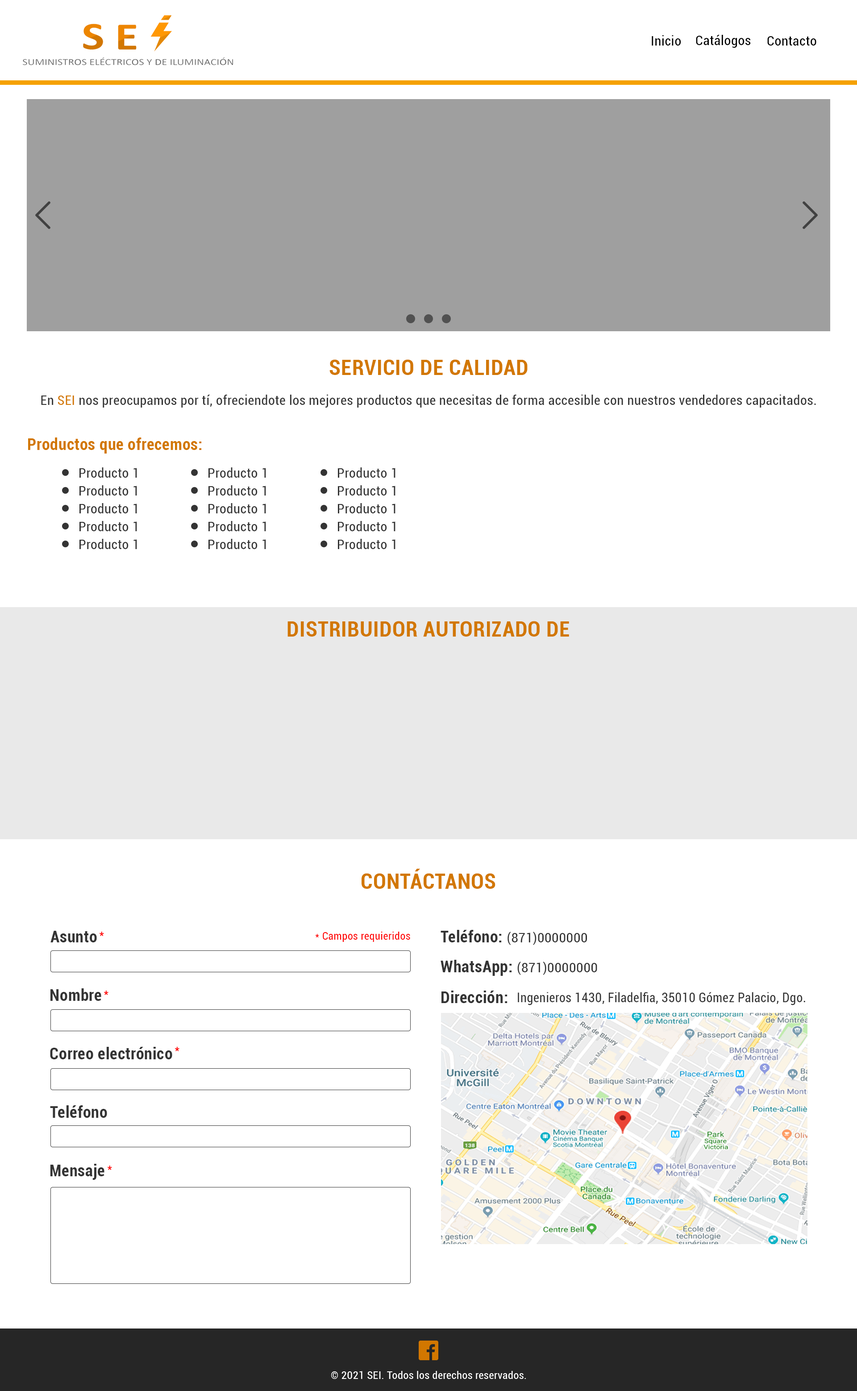
<style>
.page{position:relative;width:857px;height:1391px;background:#ffffff}
.page>*{position:absolute;margin:0}
.t1{font:13.4px "Roboto-Condensed";letter-spacing:0.025em;color:#000000}
.t2{font:21.4px "Roboto-BoldCondensed";letter-spacing:0.025em;color:#d27700}
.t3{font:13.4px "Roboto-Condensed";letter-spacing:0.025em;color:#343434}
.t4{font:13.4px "Roboto-Condensed";letter-spacing:0.025em;color:#d27700}
.t5{font:16.1px "Roboto-BoldCondensed";letter-spacing:0.025em;color:#d27700}
.t6{font:16.1px "Roboto-BoldCondensed";letter-spacing:0.025em;color:#343434}
.t7{font:13.4px "Roboto-Condensed";letter-spacing:0.025em;color:#ff0000}
.t8{font:10.7px "Roboto-Condensed";letter-spacing:0.025em;color:#ff0000}
.t9{font:13.4px "Roboto-Condensed";letter-spacing:0.025em;color:#343434;scale:0.94 1}
.t10{font:10.7px "Roboto-Condensed";letter-spacing:0.025em;color:#ffffff}
</style>
<div class="page">
<p class="t1" style="left:652px;top:35px;width:29px;height:11px">Inicio</p>
<p class="t1" style="left:696px;top:35px;width:55px;height:13px">Catálogos</p>
<p class="t1" style="left:767px;top:36px;width:50px;height:10px">Contacto</p>
<p class="t2" style="left:329px;top:359px;width:199px;height:16px">SERVICIO DE CALIDAD</p>
<p class="t3" style="left:41px;top:395px;width:775px;height:13px">En <span class="t4">SEI </span>nos preocupamos por tí, ofreciendote los mejores productos que necesitas de forma accesible con nuestros vendedores capacitados.</p>
<p class="t5" style="left:28px;top:438px;width:174px;height:16px">Productos que ofrecemos:</p>
<p class="t3" style="left:79px;top:467px;width:58px;height:11px">Producto 1</p>
<p class="t3" style="left:208px;top:467px;width:58px;height:11px">Producto 1</p>
<p class="t3" style="left:338px;top:467px;width:58px;height:11px">Producto 1</p>
<p class="t3" style="left:79px;top:485px;width:58px;height:11px">Producto 1</p>
<p class="t3" style="left:208px;top:485px;width:58px;height:11px">Producto 1</p>
<p class="t3" style="left:338px;top:485px;width:58px;height:11px">Producto 1</p>
<p class="t3" style="left:79px;top:503px;width:58px;height:10px">Producto 1</p>
<p class="t3" style="left:208px;top:503px;width:58px;height:10px">Producto 1</p>
<p class="t3" style="left:338px;top:503px;width:58px;height:10px">Producto 1</p>
<p class="t3" style="left:79px;top:521px;width:58px;height:10px">Producto 1</p>
<p class="t3" style="left:208px;top:521px;width:58px;height:10px">Producto 1</p>
<p class="t3" style="left:338px;top:521px;width:58px;height:10px">Producto 1</p>
<p class="t3" style="left:79px;top:539px;width:58px;height:10px">Producto 1</p>
<p class="t3" style="left:208px;top:539px;width:58px;height:10px">Producto 1</p>
<p class="t3" style="left:338px;top:539px;width:58px;height:10px">Producto 1</p>
<p class="t2" style="left:288px;top:621px;width:281px;height:16px">DISTRIBUIDOR AUTORIZADO DE</p>
<p class="t2" style="left:362px;top:869px;width:134px;height:20px">CONTÁCTANOS</p>
<p class="t3" style="left:441px;top:930px;width:146px;height:15px"><span class="t6">Teléfono: </span>(871)0000000</p>
<p class="t6" style="left:50px;top:931px;width:47px;height:11px">Asunto</p>
<p class="t7" style="left:100px;top:932px;width:4px;height:4px">*</p>
<p class="t8" style="left:315px;top:932px;width:95px;height:10px">* Campos requieridos</p>
<p class="t3" style="left:441px;top:960px;width:156px;height:16px"><span class="t6">WhatsApp: </span>(871)0000000</p>
<p class="t6" style="left:50px;top:988px;width:51px;height:13px">Nombre</p>
<p class="t7" style="left:104px;top:991px;width:4px;height:4px">*</p>
<p class="t6" style="left:442px;top:991px;width:66px;height:12px">Dirección:</p>
<p class="t9" style="left:518px;top:992px;width:287px;height:13px">Ingenieros 1430, Filadelfia, 35010 Gómez Palacio, Dgo.</p>
<p class="t6" style="left:50px;top:1047px;width:122px;height:12px">Correo electrónico</p>
<p class="t7" style="left:175px;top:1047px;width:4px;height:4px">*</p>
<p class="t6" style="left:50px;top:1105px;width:57px;height:13px">Teléfono</p>
<p class="t6" style="left:50px;top:1164px;width:54px;height:16px">Mensaje</p>
<p class="t7" style="left:108px;top:1166px;width:4px;height:4px">*</p>
<p class="t10" style="left:331px;top:1371px;width:195px;height:8px">© 2021 SEI. Todos los derechos reservados.</p>
</div>
